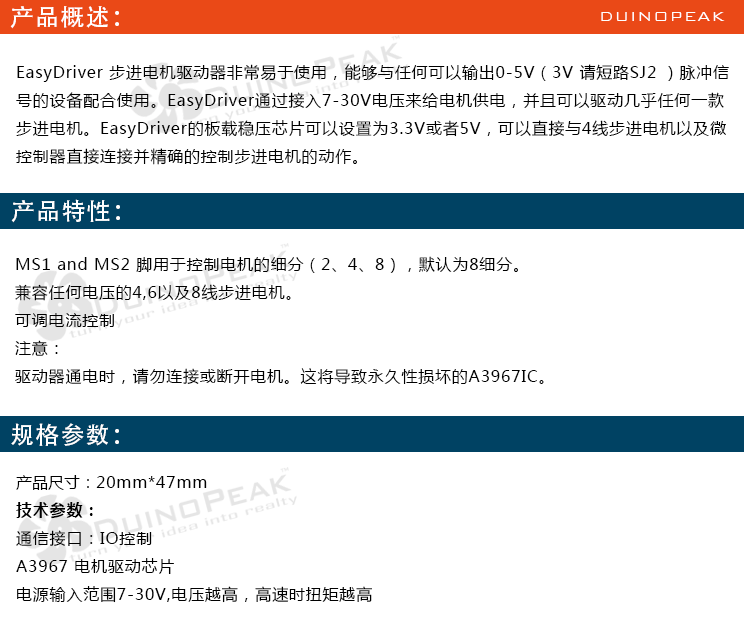
<style>
.page{position:relative;width:744px;height:620px;background:#ffffff}
.page>*{position:absolute;margin:0}
.t1{font:24px "AdobeHeitiStd-Regular";letter-spacing:0.05em;color:#ffffff}
.t2{font:18px "BankGothicBT-Light";letter-spacing:0.05em;color:#ffffff}
.t3{font:16px "MicrosoftYaHei";letter-spacing:0.05em;color:#000000}
.t4{font:16px "MicrosoftYaHei";color:#000000}
.t5{font:16px "MicrosoftYaHei-Bold";letter-spacing:0.05em;color:#000000}
</style>
<div class="page">
<p class="t1" style="left:10px;top:6px;width:109px;height:23px">产品概述：</p>
<p class="t2" style="left:601px;top:12px;width:124px;height:9px">DUINOPEAK</p>
<p class="t3" style="left:16px;top:64px;width:713px;height:101px">EasyDriver 步进电机驱动器非常易于使用，能够与任何可以输出0-5V（3V 请短路SJ2 ）脉冲信<br>号的设备配合使用。EasyDriver通过接入7-30V电压来给电机供电，并且可以驱动几乎任何一款<br>步进电机。EasyDriver的板载稳压芯片可以设置为3.3V或者5V，可以直接与4线步进电机以及微<br>控制器直接连接并精确的控制步进电机的动作。</p>
<p class="t1" style="left:11px;top:199px;width:109px;height:24px">产品特性：</p>
<p class="t3" style="left:15px;top:256px;width:529px;height:128px">MS1 and MS2 脚用于控制电机的细分（2、4、8），默认为8细分。<br>兼容任何电压的4,6以及8线步进电机。<br>可调电流控制<br>注意：<br>驱动器通电时，请勿连接或断开电机。这将导致永久性损坏的A3967IC。</p>
<p class="t1" style="left:11px;top:423px;width:108px;height:23px">规格参数：</p>
<p class="t3" style="left:16px;top:475px;width:356px;height:128px"><span class="t4">产品尺寸：</span>20mm*47mm<br><span class="t5">技术参数：</span><br>通信接口：IO控制<br>A3967 电机驱动芯片<br>电源输入范围7-30V,电压越高，高速时扭矩越高</p>
</div>
